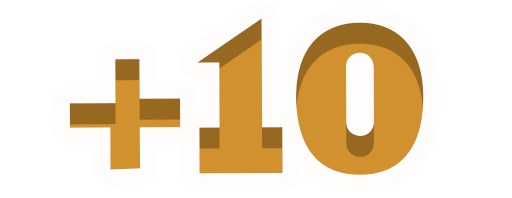
<style>
.page{position:relative;width:512px;height:198px;background:#ffffff}
.page>*{position:absolute;margin:0}
.t1{font:204.1px "BadTyp-Regular";color:#d0912e}
</style>
<div class="page">
<p class="t1" style="left:69px;top:18px;width:355px;height:157px">+10</p>
</div>
